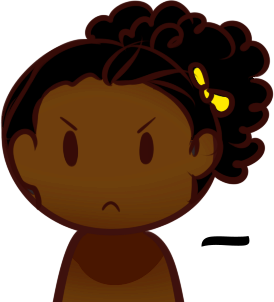
<style>
.page{position:relative;width:274px;height:302px;background:#ffffff}
.page>*{position:absolute;margin:0}
.t1{font:230.2px "Gabriola";letter-spacing:0.025em;color:#000000}
</style>
<div class="page">
<p class="t1" style="left:201px;top:236px;width:49px;height:11px">-</p>
</div>
